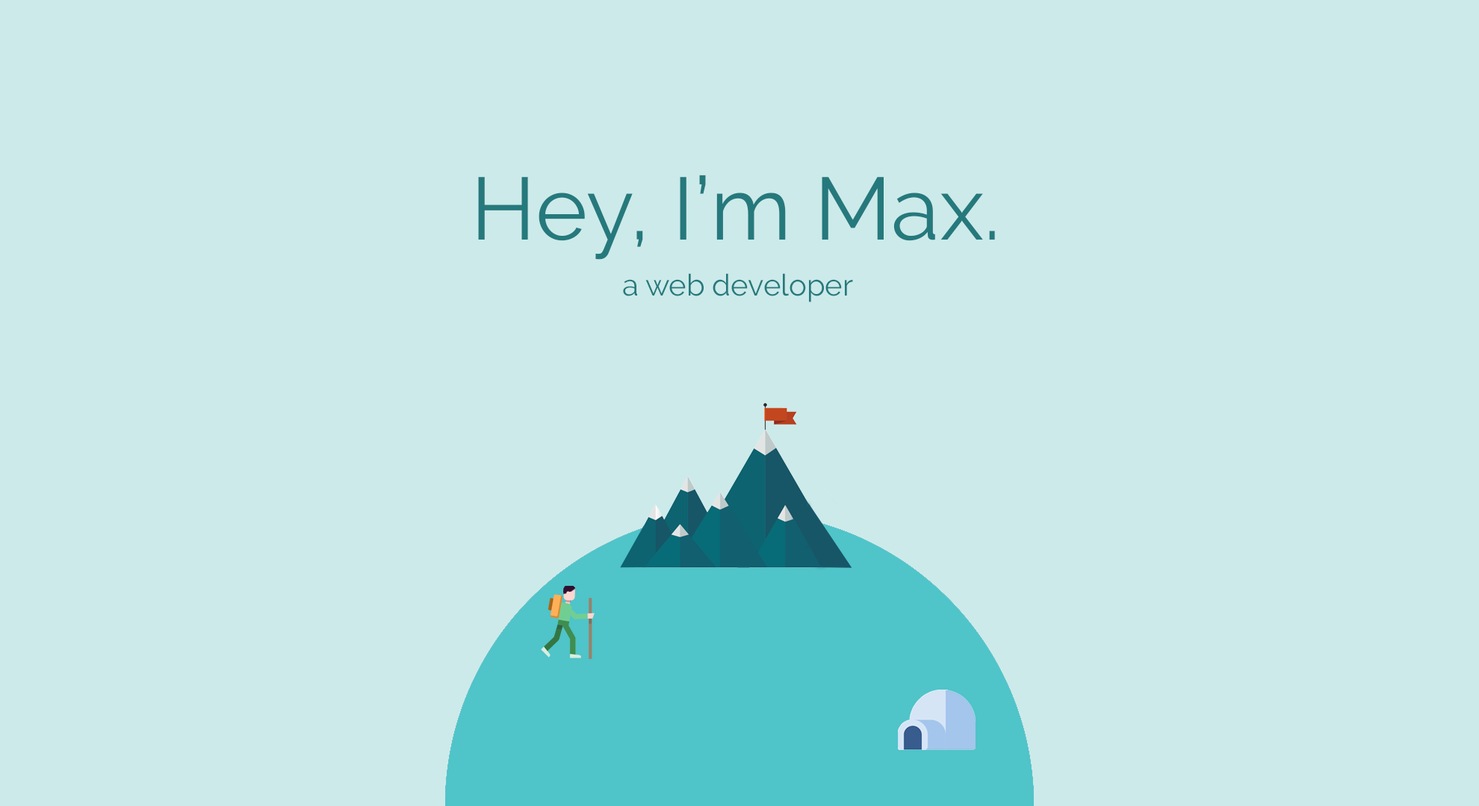
<style>
.page{position:relative;width:1479px;height:806px;background:#cceaea}
.page>*{position:absolute;margin:0}
.t1{font:88.3px "Raleway-Regular";color:#25797c}
.t2{font:29.8px "Raleway-Regular";color:#25797c}
</style>
<div class="page">
<p class="t1" style="left:478px;top:175px;width:517px;height:85px">Hey, I’m Max.</p>
<p class="t2" style="left:623px;top:273px;width:230px;height:29px">a web developer</p>
</div>
